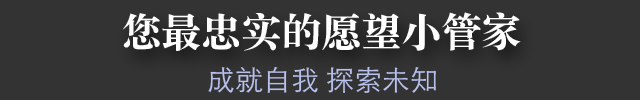
<style>
.page{position:relative;width:640px;height:100px;background:#333333}
.page>*{position:absolute;margin:0}
.t1{font:40px "STSongti-SC-Black";color:#ffffff}
.t2{font:28px "STXihei";color:#b8c0ec}
</style>
<div class="page">
<p class="t1" style="left:123px;top:12px;width:398px;height:39px">您最忠实的愿望小管家</p>
<p class="t2" style="left:208px;top:66px;width:228px;height:27px">成就自我 探索未知</p>
</div>
